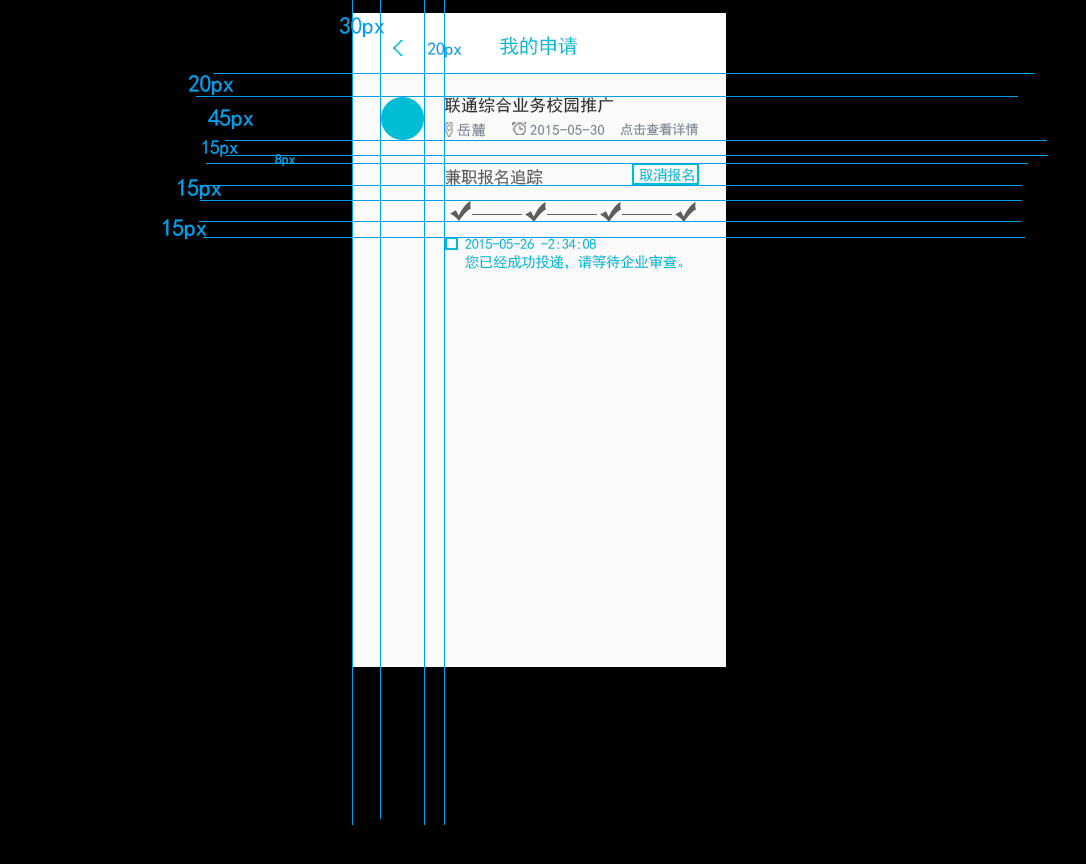
<style>
.page{position:relative;width:1086px;height:864px;background:#000000}
.page>*{position:absolute;margin:0}
.t1{font:24px "SimHei";letter-spacing:-0.02em;color:#00a0e9}
.t2{font:20px "SimHei";letter-spacing:-0.02em;color:#00bcd4}
.t3{font:18px "SimHei";letter-spacing:-0.02em;color:#00a0e9}
.t4{font:16.7px "SimHei";letter-spacing:0.02em;color:#2e3031}
.t5{font:14.4px "SimHei";letter-spacing:0.02em;color:#808792}
.t6{font:13.3px "SimHei";letter-spacing:-0.02em;color:#808792}
.t7{font:19.7px "SimHei";letter-spacing:-0.02em;color:#00a0e9}
.t8{font:14px "SimHei";letter-spacing:-0.02em;color:#00a0e9}
.t9{font:16.7px "SimHei";letter-spacing:-0.02em;color:#5d5d5d}
.t10{font:14.4px "SimHei";letter-spacing:-0.02em;color:#00bcd4}
.t11{font:14.4px/8.9px "SimHei";letter-spacing:-0.02em;color:#00bcd4}
</style>
<div class="page">
<p class="t1" style="left:340px;top:17px;width:45px;height:21px">30px</p>
<p class="t2" style="left:500px;top:36px;width:77px;height:20px">我的申请</p>
<p class="t3" style="left:427px;top:42px;width:35px;height:16px">20px</p>
<p class="t1" style="left:188px;top:75px;width:46px;height:21px">20px</p>
<p class="t4" style="left:444px;top:97px;width:170px;height:16px">联通综合业务校园推广</p>
<p class="t1" style="left:208px;top:109px;width:46px;height:21px">45px</p>
<p class="t5" style="left:457px;top:123px;width:29px;height:14px">岳麓</p>
<p class="t5" style="left:530px;top:124px;width:75px;height:11px">2015-05-30</p>
<p class="t6" style="left:620px;top:123px;width:79px;height:13px">点击查看详情</p>
<p class="t7" style="left:202px;top:140px;width:36px;height:17px">15px</p>
<p class="t8" style="left:275px;top:154px;width:20px;height:12px">8px</p>
<p class="t9" style="left:445px;top:169px;width:98px;height:16px">兼职报名追踪</p>
<p class="t10" style="left:639px;top:168px;width:55px;height:14px">取消报名</p>
<p class="t1" style="left:178px;top:179px;width:44px;height:21px">15px</p>
<p class="t1" style="left:163px;top:219px;width:44px;height:21px">15px</p>
<p class="t11" style="left:465px;top:238px;width:218px;height:32px">2015-05-26 -2:34:08<br><br>您已经成功投递，请等待企业审查。</p>
</div>
